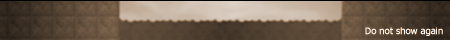
<style>
.page{position:relative;width:450px;height:40px}
.page>*{position:absolute;margin:0}
.t1{font:9px "Tahoma";color:#ffffff;font-weight:bold}
</style>
<div class="page">
<p class="t1" style="left:365px;top:27px;width:78px;height:9px">Do not show again</p>
</div>
